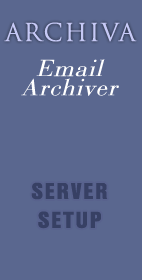
<style>
.page{position:relative;width:142px;height:280px;background:#5a678f}
.page>*{position:absolute;margin:0}
.t1{font:24px "TrajanPro-Regular";letter-spacing:0.2em;color:#c6c9f6}
.t2{font:24px "Bodoni-Italic";letter-spacing:0.2em;color:#ffffff}
.t3{font:24px "NimbusSanT-BlacCond";letter-spacing:0.2em;color:#374064}
</style>
<div class="page">
<p class="t1" style="left:4px;top:22px;width:133px;height:20px">ARCHIVA</p>
<p class="t2" style="left:21px;top:59px;width:98px;height:37px;text-align:center">Email<br><br>Archiver</p>
<p class="t3" style="left:31px;top:182px;width:77px;height:47px;text-align:center">SERVER<br><br><br>SETUP</p>
</div>
